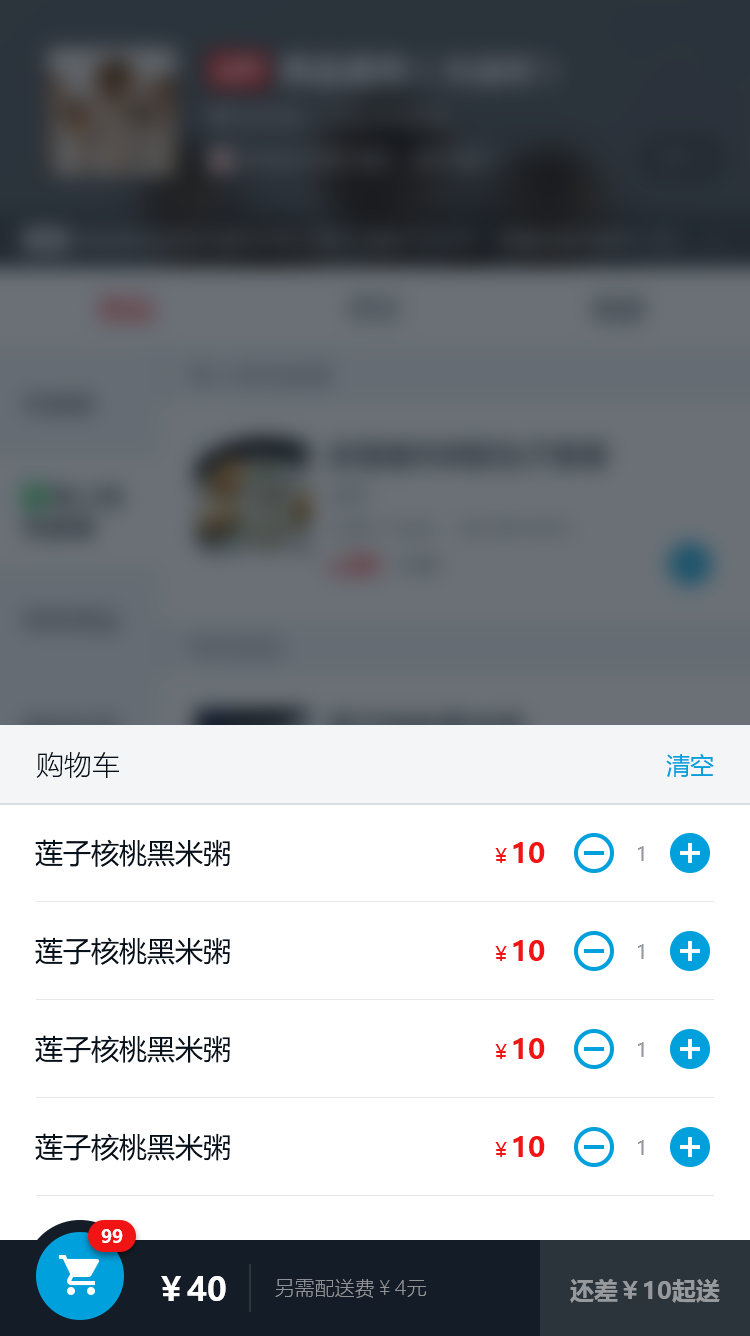
<style>
.page{position:relative;width:750px;height:1336px;background:#ffffff}
.page>*{position:absolute;margin:0}
.t1{font:28px "MicrosoftYaHeiLight";color:#07111b}
.t2{font:24px "MicrosoftYaHei";color:#00a0dc}
.t3{font:28px "MicrosoftYaHei";color:#07111b}
.t4{font:28px "MicrosoftYaHei-Bold";color:#f01414}
.t5{font:20px "MicrosoftYaHei";color:#f01414}
.t6{font:20px "MicrosoftYaHei";color:#93999f}
.t7{font:18px "MicrosoftYaHei-Bold";color:#ffffff}
.t8{font:32px "MicrosoftYaHei-Bold";color:#ffffff}
.t9{font:20px "MicrosoftYaHeiLight";color:#919396}
.t10{font:24px "MicrosoftYaHei-Bold";color:#979a9c}
</style>
<div class="page">
<p class="t1" style="left:36px;top:752px;width:83px;height:26px">购物车</p>
<p class="t2" style="left:666px;top:754px;width:48px;height:23px">清空</p>
<p class="t3" style="left:35px;top:839px;width:195px;height:28px">莲子核桃黑米粥</p>
<p class="t4" style="left:495px;top:842px;width:50px;height:21px"><span class="t5">￥</span>10</p>
<p class="t6" style="left:638px;top:846px;width:6px;height:15px">1</p>
<p class="t3" style="left:35px;top:937px;width:195px;height:28px">莲子核桃黑米粥</p>
<p class="t4" style="left:495px;top:940px;width:50px;height:21px"><span class="t5">￥</span>10</p>
<p class="t6" style="left:638px;top:944px;width:6px;height:15px">1</p>
<p class="t3" style="left:35px;top:1035px;width:195px;height:28px">莲子核桃黑米粥</p>
<p class="t4" style="left:495px;top:1038px;width:50px;height:21px"><span class="t5">￥</span>10</p>
<p class="t6" style="left:638px;top:1042px;width:6px;height:15px">1</p>
<p class="t3" style="left:35px;top:1133px;width:195px;height:28px">莲子核桃黑米粥</p>
<p class="t4" style="left:495px;top:1136px;width:50px;height:21px"><span class="t5">￥</span>10</p>
<p class="t6" style="left:638px;top:1140px;width:6px;height:15px">1</p>
<p class="t7" style="left:101px;top:1229px;width:22px;height:14px">99</p>
<p class="t8" style="left:161px;top:1276px;width:65px;height:25px">￥40</p>
<p class="t9" style="left:275px;top:1279px;width:151px;height:19px">另需配送费￥4元</p>
<p class="t10" style="left:570px;top:1279px;width:150px;height:24px">还差￥10起送</p>
</div>
